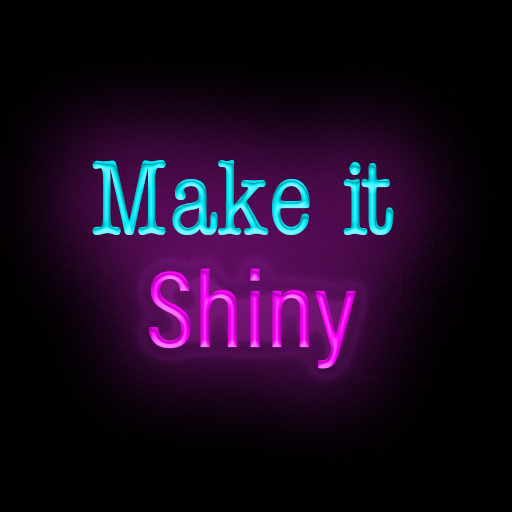
<style>
.page{position:relative;width:512px;height:512px;background:#000000}
.page>*{position:absolute;margin:0}
.t1{font:110px "AmericanTypewriter-Condensed"}
.t2{font:110px "AcuminConcept-CondensedMedium"}
</style>
<div class="page">
<p class="t1" style="left:92px;top:160px;width:302px;height:75px">Make it</p>
<p class="t2" style="left:148px;top:268px;width:208px;height:101px">Shiny</p>
</div>
